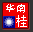
<style>
.page{position:relative;width:33px;height:32px;background:#f20000}
.page>*{position:absolute;margin:0}
.t1{font:10.4px "SimSun";color:#ffffff}
.t2{font:11.7px "SimSun";color:#ffffff}
</style>
<div class="page">
<p class="t1" style="left:6px;top:4px;width:19px;height:9px">华南</p>
<p class="t2" style="left:16px;top:15px;width:11px;height:12px">桂</p>
</div>
